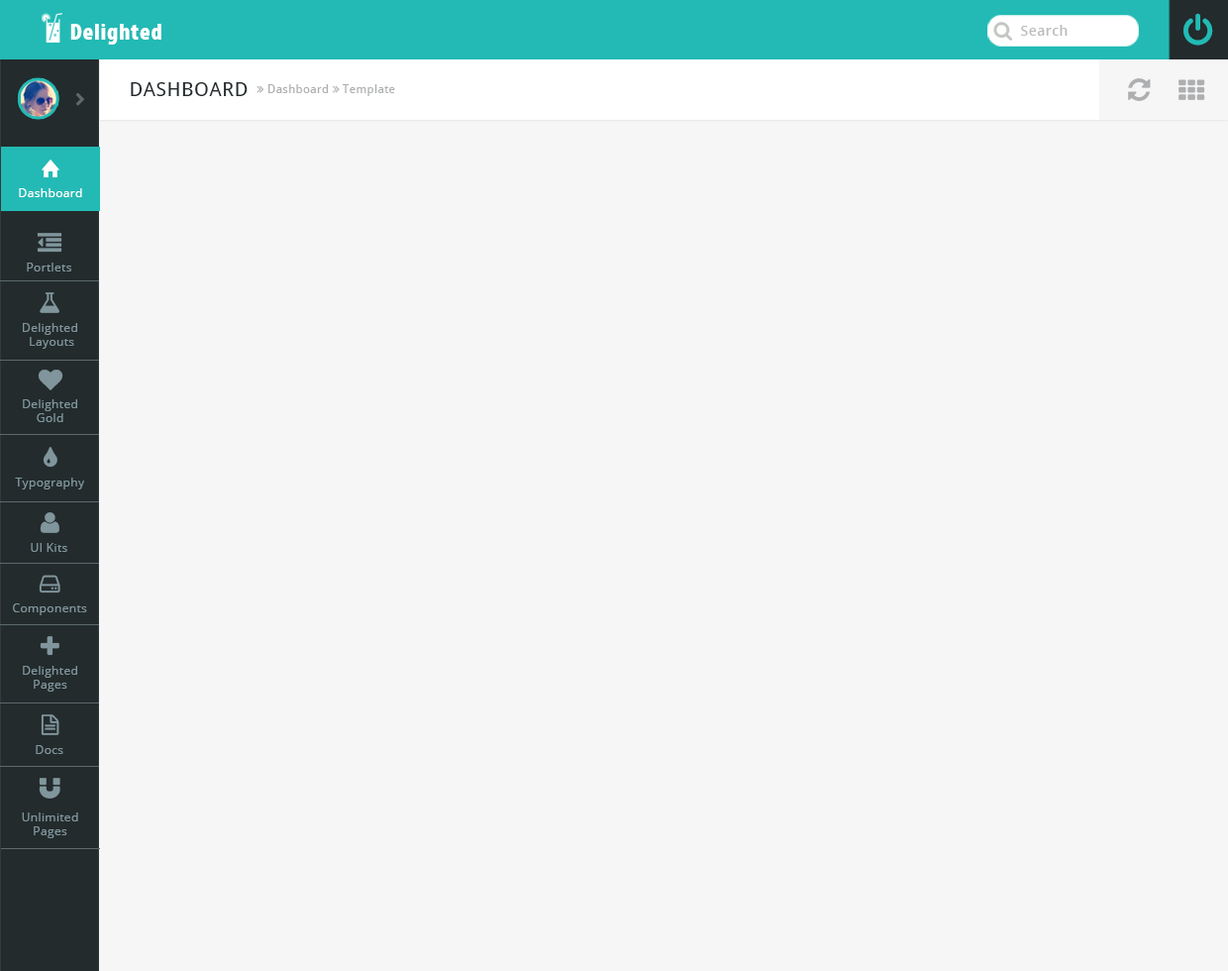
<style>
.page{position:relative;width:1228px;height:971px;background:#f6f6f6}
.page>*{position:absolute;margin:0}
.t1{font:23.8px "MyriadPro-BlackCond";letter-spacing:0.03em;color:#ffffff}
.t2{font:13.9px "OpenSans-Semibold";letter-spacing:0.03em;color:#bbbbbb}
.t3{font:19.8px "DroidSans";letter-spacing:0.03em;color:#232b2d}
.t4{font:11.9px "OpenSans";letter-spacing:0.03em;color:#ffffff}
.t5{font:11.9px "OpenSans";letter-spacing:0.03em;color:#80969c}
</style>
<div class="page">
<p class="t1" style="left:70px;top:24px;width:91px;height:21px">Delighted</p>
<p class="t2" style="left:1021px;top:25px;width:47px;height:11px">Search</p>
<p class="t3" style="left:131px;top:82px;width:117px;height:14px">DASHBOARD</p>
<p class="t4" style="left:19px;top:188px;width:63px;height:9px">Dashboard</p>
<p class="t5" style="left:27px;top:263px;width:44px;height:8px">Portlets</p>
<p class="t5" style="left:23px;top:323px;width:54px;height:26px;text-align:center">Delighted <br>Layouts</p>
<p class="t5" style="left:23px;top:399px;width:54px;height:23px;text-align:center">Delighted<br>Gold</p>
<p class="t5" style="left:15px;top:477px;width:69px;height:12px">Typography</p>
<p class="t5" style="left:31px;top:543px;width:36px;height:9px">UI Kits</p>
<p class="t5" style="left:13px;top:603px;width:74px;height:12px">Components</p>
<p class="t5" style="left:23px;top:666px;width:54px;height:25px;text-align:center">Delighted<br>Pages</p>
<p class="t5" style="left:36px;top:745px;width:27px;height:9px">Docs</p>
<p class="t5" style="left:22px;top:812px;width:56px;height:26px;text-align:center">Unlimited<br>Pages</p>
</div>
